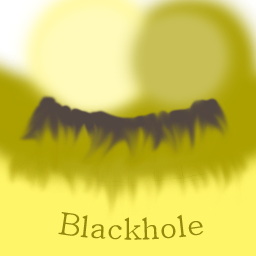
<style>
.page{position:relative;width:256px;height:256px}
.page>*{position:absolute;margin:0}
.t1{font:30px "Batang";color:#94890d}
</style>
<div class="page">
<p class="t1" style="left:58px;top:212px;width:146px;height:28px">Blackhole</p>
</div>
